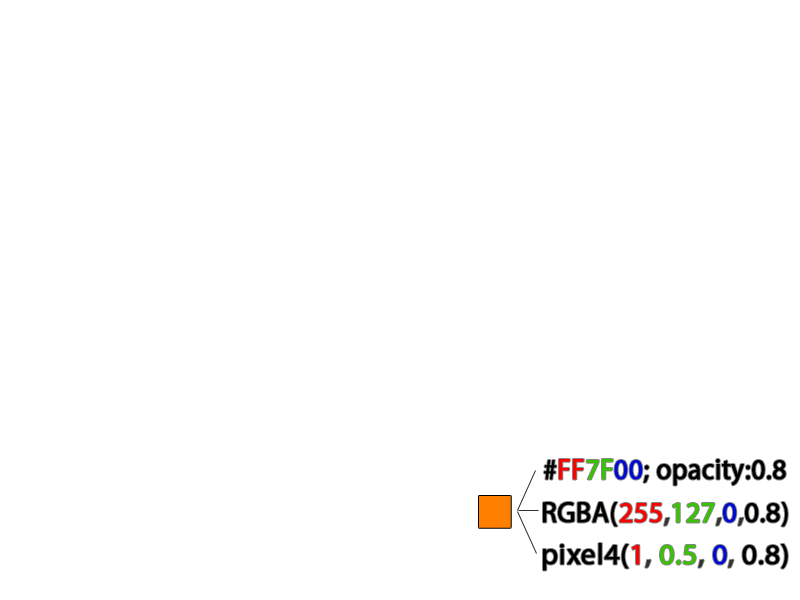
<style>
.page{position:relative;width:800px;height:600px;background:#ffffff}
.page>*{position:absolute;margin:0}
.t1{font:29.5px "MyriadPro-Regular";color:#000000;font-weight:bold;scale:0.92 1}
.t2{font:29.5px "MyriadPro-Regular";color:#ff0000;font-weight:bold;scale:0.92 1}
.t3{font:29.5px "MyriadPro-Regular";color:#37c400;font-weight:bold;scale:0.92 1}
.t4{font:29.5px "MyriadPro-Regular";color:#000ad5;font-weight:bold;scale:0.92 1}
.t5{font:29.5px "MyriadPro-Regular";color:#000000;font-weight:bold;scale:0.95 1}
.t6{font:29.5px "MyriadPro-Regular";color:#ff0000;font-weight:bold;scale:0.95 1}
.t7{font:29.5px "MyriadPro-Regular";color:#323232;font-weight:bold;scale:0.95 1}
.t8{font:29.5px "MyriadPro-Regular";color:#37c400;font-weight:bold;scale:0.95 1}
.t9{font:29.5px "MyriadPro-Regular";color:#000ad5;font-weight:bold;scale:0.95 1}
.t10{font:29.5px "MyriadPro-Regular";color:#000000;font-weight:bold}
.t11{font:29.5px "MyriadPro-Regular";color:#ff0000;font-weight:bold}
.t12{font:29.5px "MyriadPro-Regular";color:#323232;font-weight:bold}
.t13{font:29.5px "MyriadPro-Regular";color:#37c400;font-weight:bold}
.t14{font:29.5px "MyriadPro-Regular";color:#000ad5;font-weight:bold}
</style>
<div class="page">
<p class="t1" style="left:544px;top:459px;width:242px;height:27px">#<span class="t2">FF</span><span class="t3">7F</span><span class="t4">00</span>; opacity:0.8</p>
<p class="t5" style="left:543px;top:502px;width:245px;height:25px">RGBA(<span class="t6">255</span><span class="t7">,</span><span class="t8">127</span><span class="t7">,</span><span class="t9">0</span><span class="t7">,</span>0.8)</p>
<p class="t10" style="left:543px;top:543px;width:245px;height:28px">pixel4(<span class="t11">1</span><span class="t12">, </span><span class="t13">0.5</span><span class="t12">, </span><span class="t14">0</span><span class="t12">,</span> 0.8)</p>
</div>
